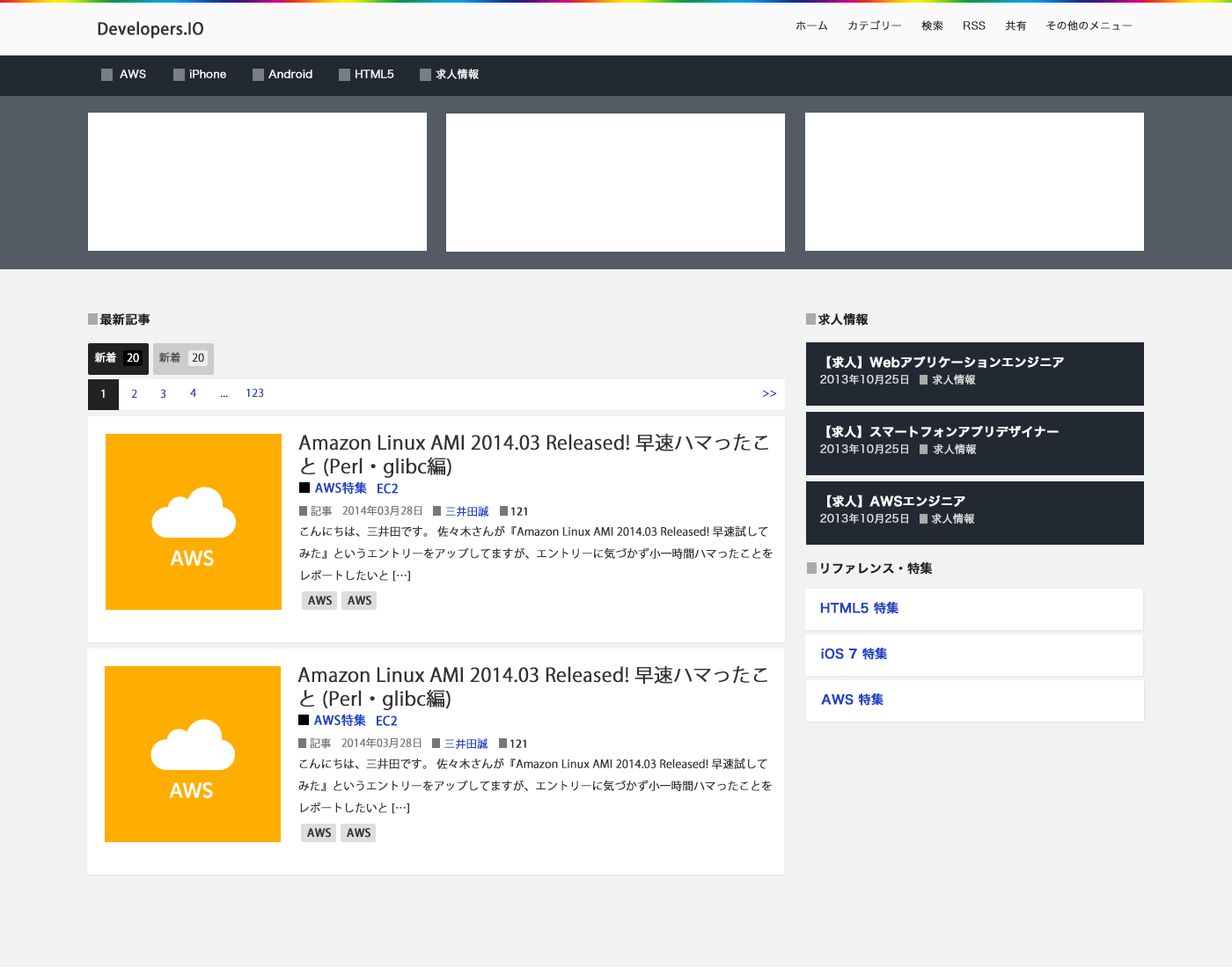
<style>
.page{position:relative;width:1232px;height:968px;background:#ffffff}
.page>*{position:absolute;margin:0}
.t1{font:16.1px "KozGoPr6N-Medium";color:#333333;font-weight:bold}
.t2{font:10.5px "HiraKakuPro-W3";color:#333333;font-weight:bold}
.t3{font:10.5px "HiraKakuPro-W3";color:#fafafa;font-weight:bold}
.t4{font:12.3px "HiraKakuPro-W6";color:#222222;font-weight:bold}
.t5{font:10.6px "KozGoPro-Regular";color:#ffffff;font-weight:bold}
.t6{font:10.6px "KozGoPro-Regular";color:#444444;font-weight:bold}
.t7{font:10.6px "KozGoPro-Regular";color:#333333;font-weight:bold}
.t8{font:12.3px "HiraKakuPro-W6";color:#ffffff;font-weight:bold}
.t9{font:10.6px "HiraKakuPro-W3";color:#dddddd;font-weight:bold}
.t10{font:10.6px "KozGoPro-Regular";color:#2043c6;font-weight:bold}
.t11{font:10.6px "KozGoPro-Regular";color:#222222;font-weight:bold}
.t12{font:18.9px/23.8px "KozGoPro-Regular";color:#333333;font-weight:bold}
.t13{font:12.3px "KozGoPro-Medium";color:#2043c6;font-weight:bold}
.t14{font:10.6px "KozGoPro-Regular";color:#777777;font-weight:bold}
.t15{font:10.6px "KozGoPro-Medium";color:#333333;font-weight:bold}
.t16{font:11px/22px "KozGoPro-Regular";color:#333333;font-weight:bold}
.t17{font:11px "KozGoPro-Medium";color:#333333;font-weight:bold}
.t18{font:12.3px "HiraKakuPro-W6";color:#2043c6;font-weight:bold}
</style>
<div class="page">
<p class="t1" style="left:98px;top:21px;width:105px;height:18px">Developers.IO</p>
<p class="t2" style="left:795px;top:21px;width:33px;height:10px">ホーム</p>
<p class="t2" style="left:848px;top:20px;width:53px;height:11px">カテゴリー</p>
<p class="t2" style="left:921px;top:20px;width:22px;height:11px">検索</p>
<p class="t2" style="left:964px;top:21px;width:22px;height:9px">RSS</p>
<p class="t2" style="left:1005px;top:20px;width:22px;height:11px">共有</p>
<p class="t2" style="left:1046px;top:20px;width:86px;height:11px">その他のメニュー</p>
<p class="t3" style="left:120px;top:70px;width:26px;height:8px">AWS</p>
<p class="t3" style="left:189px;top:70px;width:37px;height:8px">iPhone</p>
<p class="t3" style="left:268px;top:70px;width:44px;height:8px">Android</p>
<p class="t3" style="left:355px;top:70px;width:39px;height:8px">HTML5</p>
<p class="t3" style="left:436px;top:69px;width:43px;height:10px">求人情報</p>
<p class="t4" style="left:99px;top:313px;width:51px;height:13px">最新記事</p>
<p class="t4" style="left:818px;top:313px;width:51px;height:13px">求人情報</p>
<p class="t5" style="left:95px;top:352px;width:21px;height:11px">新着</p>
<p class="t5" style="left:127px;top:353px;width:12px;height:10px">20</p>
<p class="t6" style="left:159px;top:352px;width:21px;height:11px">新着</p>
<p class="t7" style="left:192px;top:353px;width:12px;height:10px">20</p>
<p class="t8" style="left:826px;top:355px;width:238px;height:14px">【求人】Webアプリケーションエンジニア</p>
<p class="t9" style="left:820px;top:374px;width:88px;height:11px">2013年10月25日</p>
<p class="t9" style="left:932px;top:374px;width:44px;height:11px">求人情報</p>
<p class="t5" style="left:101px;top:389px;width:4px;height:9px">1</p>
<p class="t10" style="left:131px;top:389px;width:6px;height:9px">2</p>
<p class="t10" style="left:160px;top:389px;width:6px;height:10px">3</p>
<p class="t10" style="left:190px;top:388px;width:6px;height:9px">4</p>
<p class="t10" style="left:246px;top:388px;width:18px;height:10px">123</p>
<p class="t10" style="left:762px;top:390px;width:15px;height:7px">&gt;&gt;</p>
<p class="t11" style="left:220px;top:395px;width:8px;height:3px">...</p>
<p class="t8" style="left:826px;top:425px;width:233px;height:13px">【求人】スマートフォンアプリデザイナー</p>
<p class="t12" style="left:298px;top:433px;width:470px;height:45px">Amazon Linux AMI 2014.03 Released! 早速ハマったこ<br>と (Perl・glibc編)</p>
<p class="t9" style="left:820px;top:443px;width:88px;height:11px">2013年10月25日</p>
<p class="t9" style="left:933px;top:443px;width:44px;height:11px">求人情報</p>
<p class="t13" style="left:315px;top:481px;width:52px;height:13px">AWS特集</p>
<p class="t13" style="left:377px;top:483px;width:21px;height:11px">EC2</p>
<p class="t8" style="left:827px;top:495px;width:138px;height:13px">【求人】AWSエンジニア</p>
<p class="t14" style="left:311px;top:505px;width:21px;height:12px">記事</p>
<p class="t14" style="left:342px;top:505px;width:80px;height:11px">2014年03月28日</p>
<p class="t10" style="left:445px;top:506px;width:43px;height:11px">三井田誠</p>
<p class="t15" style="left:511px;top:507px;width:16px;height:9px">121</p>
<p class="t9" style="left:820px;top:513px;width:88px;height:11px">2013年10月25日</p>
<p class="t9" style="left:931px;top:513px;width:44px;height:11px">求人情報</p>
<p class="t16" style="left:299px;top:525px;width:474px;height:57px">こんにちは、三井田です。 佐々木さんが『Amazon Linux AMI 2014.03 Released! 早速試して<br>みた』というエントリーをアップしてますが、エントリーに気づかず小一時間ハマったことを<br>レポートしたいと […]</p>
<p class="t4" style="left:821px;top:561px;width:112px;height:14px">リファレンス・特集</p>
<p class="t17" style="left:308px;top:596px;width:24px;height:9px">AWS</p>
<p class="t17" style="left:348px;top:596px;width:23px;height:9px">AWS</p>
<p class="t18" style="left:820px;top:601px;width:78px;height:13px">HTML5 特集</p>
<p class="t18" style="left:821px;top:647px;width:66px;height:13px">iOS 7 特集</p>
<p class="t12" style="left:297px;top:665px;width:470px;height:45px">Amazon Linux AMI 2014.03 Released! 早速ハマったこ<br>と (Perl・glibc編)</p>
<p class="t18" style="left:821px;top:693px;width:62px;height:13px">AWS 特集</p>
<p class="t13" style="left:314px;top:714px;width:52px;height:12px">AWS特集</p>
<p class="t13" style="left:377px;top:715px;width:20px;height:11px">EC2</p>
<p class="t14" style="left:310px;top:737px;width:21px;height:12px">記事</p>
<p class="t14" style="left:341px;top:737px;width:80px;height:11px">2014年03月28日</p>
<p class="t10" style="left:444px;top:738px;width:43px;height:11px">三井田誠</p>
<p class="t15" style="left:510px;top:739px;width:16px;height:9px">121</p>
<p class="t16" style="left:298px;top:758px;width:474px;height:56px">こんにちは、三井田です。 佐々木さんが『Amazon Linux AMI 2014.03 Released! 早速試して<br>みた』というエントリーをアップしてますが、エントリーに気づかず小一時間ハマったことを<br>レポートしたいと […]</p>
<p class="t17" style="left:307px;top:828px;width:24px;height:10px">AWS</p>
<p class="t17" style="left:347px;top:828px;width:23px;height:10px">AWS</p>
</div>
